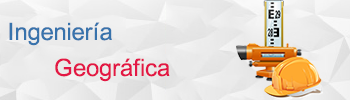
<style>
.page{position:relative;width:350px;height:100px}
.page>*{position:absolute;margin:0}
.t1{font:24px "ArialMT";color:#3873ac}
.t2{font:24px "ArialMT";color:#e31745}
</style>
<div class="page">
<p class="t1" style="left:9px;top:22px;width:103px;height:24px">Ingeniería</p>
<p class="t2" style="left:55px;top:58px;width:115px;height:24px">Geográfica</p>
</div>
